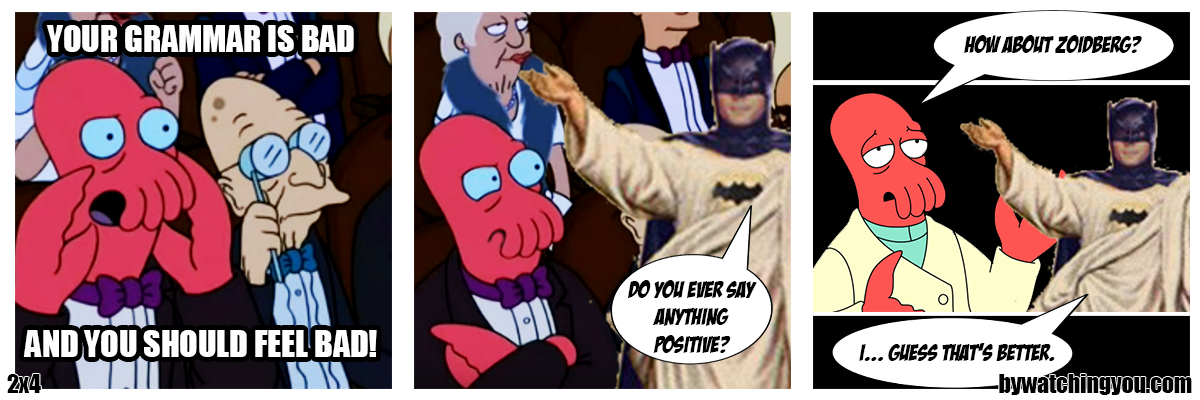
<style>
.page{position:relative;width:1200px;height:400px}
.page>*{position:absolute;margin:0}
.t1{font:34px "Impact";color:#fffefe}
.t2{font:23px "BadaBoomBB";color:#000000}
.t3{font:23.7px "Impact";color:#000000}
</style>
<div class="page">
<p class="t1" style="left:46px;top:25px;width:308px;height:27px">YOUR GRAMMAR IS BAD</p>
<p class="t2" style="left:964px;top:35px;width:178px;height:18px">how about zoidberg?</p>
<p class="t2" style="left:628px;top:280px;width:129px;height:73px;text-align:center">do you ever say<br>anything<br>positive?</p>
<p class="t1" style="left:23px;top:330px;width:354px;height:27px">AND YOU SHOULD FEEL BAD!</p>
<p class="t2" style="left:859px;top:343px;width:196px;height:18px">i... guess that’s better.</p>
<p class="t3" style="left:7px;top:374px;width:34px;height:19px">2x4</p>
<p class="t3" style="left:999px;top:374px;width:193px;height:21px">bywatchingyou.com</p>
</div>
